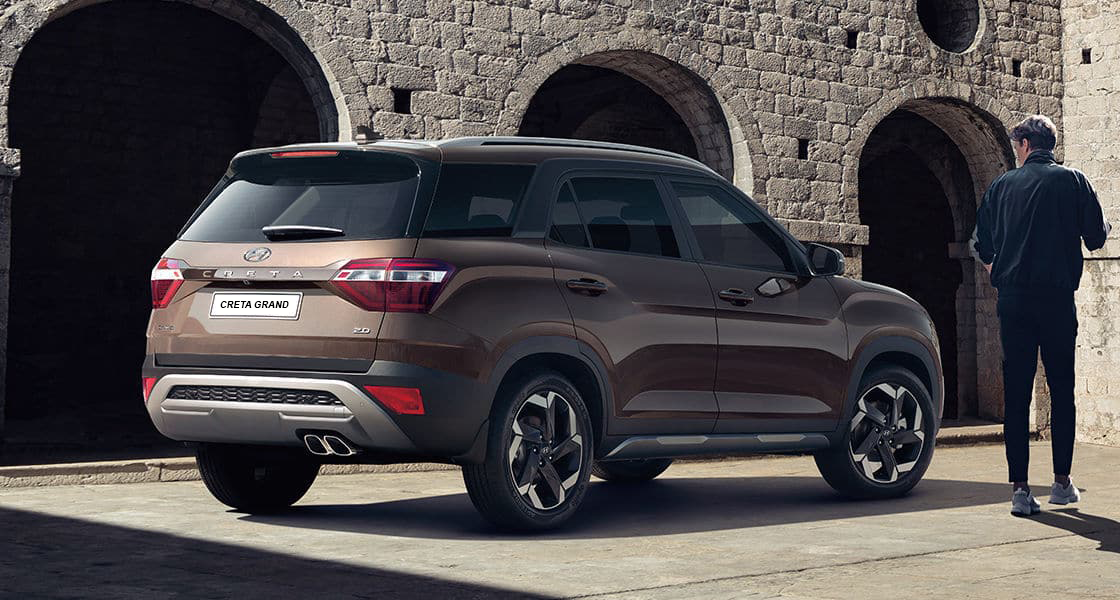
<style>
.page{position:relative;width:1120px;height:600px}
.page>*{position:absolute;margin:0}
.t1{font:9.6px "Arial-BoldMT";color:#000000}
</style>
<div class="page">
<p class="t1" style="left:220px;top:301px;width:69px;height:7px">CRETA GRAND</p>
</div>
